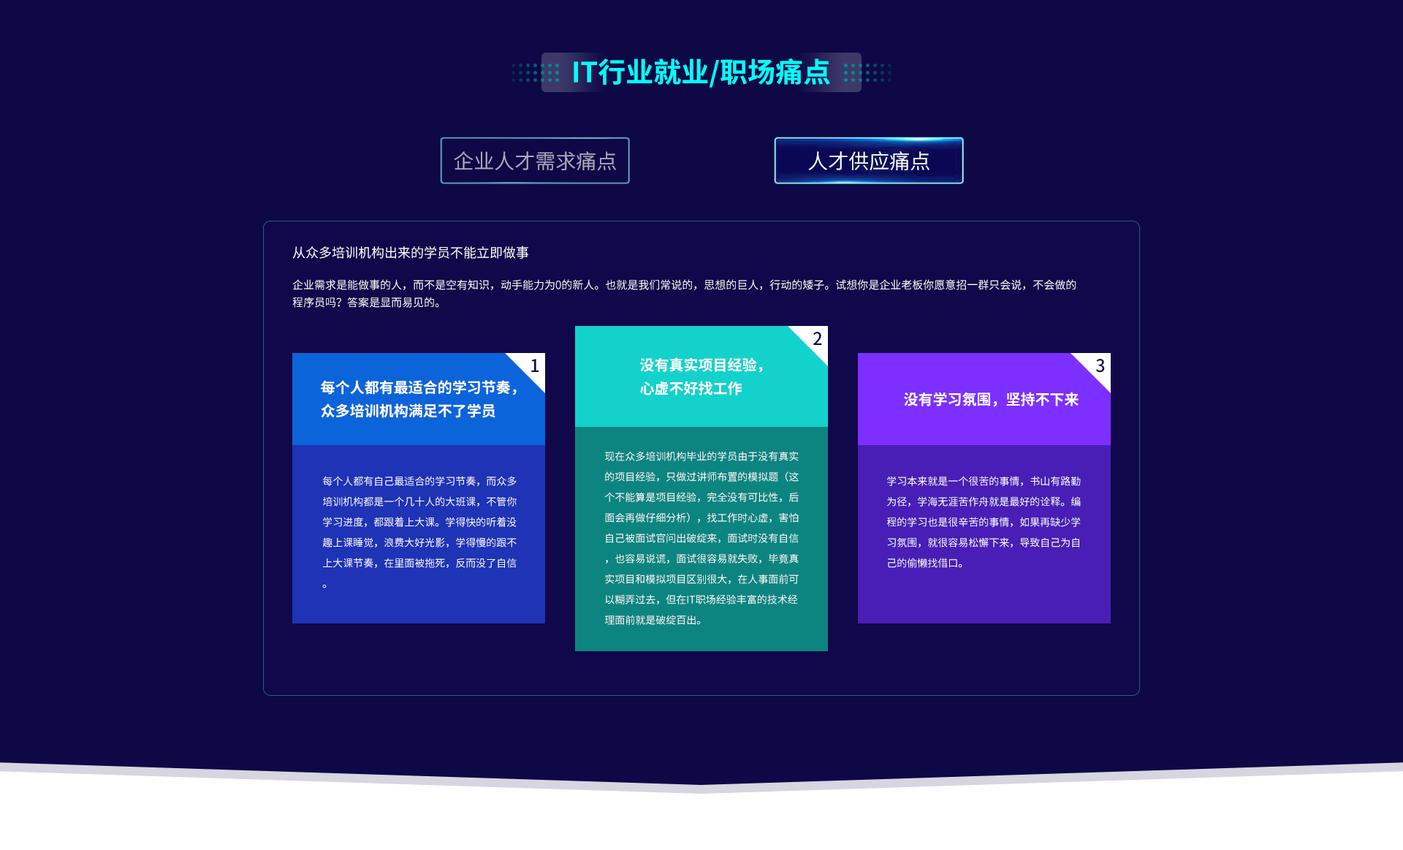
<style>
.page{position:relative;width:1403px;height:850px;background:#0e0846}
.page>*{position:absolute;margin:0}
.t1{font:27.8px "SourceHanSansCN-Bold";color:#00fffa}
.t2{font:20.5px "SourceHanSansCN-Normal";color:#aba9be}
.t3{font:20.5px "SourceHanSansCN-Normal";color:#ffffff}
.t4{font:13.2px "SourceHanSansCN-Normal";color:#ffffff}
.t5{font:11px/17.5px "SourceHanSansCN-Normal";color:#ffffff}
.t6{font:17.5px "SourceHanSansCN-Medium";color:#10084b}
.t7{font:14.6px/23.4px "SourceHanSansCN-Bold";color:#ffffff}
.t8{font:14.6px "SourceHanSansCN-Bold";color:#ffffff}
.t9{font:10.2px/20.5px "SourceHanSansCN-Normal";color:#ffffff}
</style>
<div class="page">
<p class="t1" style="left:574px;top:58px;width:256px;height:30px">IT行业就业/职场痛点</p>
<p class="t2" style="left:454px;top:151px;width:162px;height:19px">企业人才需求痛点</p>
<p class="t3" style="left:808px;top:151px;width:122px;height:19px">人才供应痛点</p>
<p class="t4" style="left:292px;top:246px;width:236px;height:13px">从众多培训机构出来的学员不能立即做事</p>
<p class="t5" style="left:292px;top:279px;width:784px;height:29px">企业需求是能做事的人，而不是空有知识，动手能力为0的新人。也就是我们常说的，思想的巨人，行动的矮子。试想你是企业老板你愿意招一群只会说，不会做的<br>程序员吗？答案是显而易见的。</p>
<p class="t6" style="left:813px;top:332px;width:9px;height:13px">2</p>
<p class="t6" style="left:531px;top:359px;width:8px;height:13px">1</p>
<p class="t7" style="left:640px;top:357px;width:123px;height:38px">没有真实项目经验，<br>心虚不好找工作</p>
<p class="t6" style="left:1095px;top:359px;width:10px;height:14px">3</p>
<p class="t7" style="left:321px;top:380px;width:196px;height:38px">每个人都有最适合的学习节奏，<br>众多培训机构满足不了学员</p>
<p class="t8" style="left:904px;top:392px;width:175px;height:15px">没有学习氛围，坚持不下来</p>
<p class="t9" style="left:604px;top:451px;width:195px;height:174px">现在众多培训机构毕业的学员由于没有真实的项目经验，只做过讲师布置的模拟题（这个不能算是项目经验，完全没有可比性，后面会再做仔细分析），找工作时心虚，害怕自己被面试官问出破绽来，面试时没有自信，也容易说谎，面试很容易就失败，毕竟真实项目和模拟项目区别很大，在人事面前可以糊弄过去，但在IT职场经验丰富的技术经理面前就是破绽百出。</p>
<p class="t9" style="left:322px;top:476px;width:195px;height:112px">每个人都有自己最适合的学习节奏，而众多培训机构都是一个几十人的大班课，不管你学习进度，都跟着上大课。学得快的听着没趣上课睡觉，浪费大好光影，学得慢的跟不上大课节奏，在里面被拖死，反而没了自信。</p>
<p class="t9" style="left:887px;top:476px;width:194px;height:92px">学习本来就是一个很苦的事情，书山有路勤为径，学海无涯苦作舟就是最好的诠释。编程的学习也是很辛苦的事情，如果再缺少学习氛围，就很容易松懈下来，导致自己为自己的偷懒找借口。</p>
</div>
